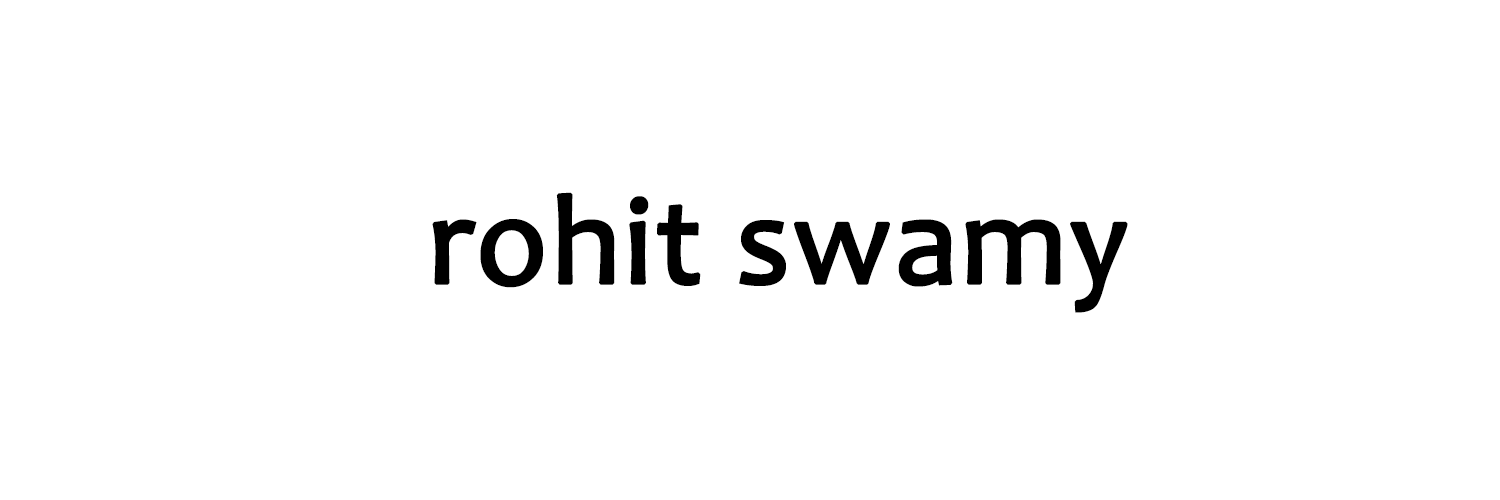
<style>
.page{position:relative;width:1500px;height:500px;background:#ffffff}
.page>*{position:absolute;margin:0}
.t1{font:128px "Candara";color:#000000;font-weight:bold}
</style>
<div class="page">
<p class="t1" style="left:432px;top:192px;width:696px;height:121px">rohit swamy</p>
</div>
